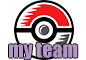
<style>
.page{position:relative;width:86px;height:60px;background:#ffffff}
.page>*{position:absolute;margin:0}
.t1{font:20px "Impact";color:#b396c5}
</style>
<div class="page">
<p class="t1" style="left:9px;top:42px;width:69px;height:18px">my team</p>
</div>
